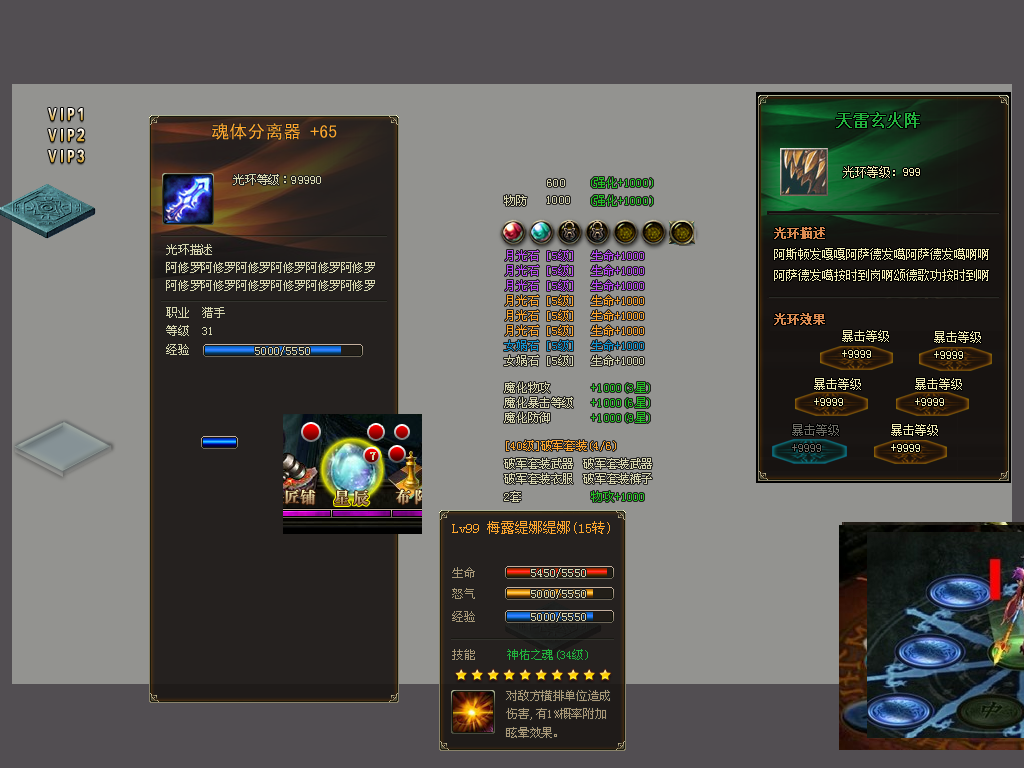
<style>
.page{position:relative;width:1024px;height:768px;background:#939390}
.page>*{position:absolute;margin:0}
.t1{font:18px "-G-h-e-i-0-1-m";font-weight:bold}
.t2{font:18px "SimHei";color:#ffa72e}
.t3{font:12px "SimSun";color:#d8d6af}
.t4{font:12px "SimSun";color:#23c423}
.t5{font:12px "SimSun";color:#be4bf9}
.t6{font:12px/18.6px "SimSun";color:#d8d6af}
.t7{font:12px "SimSun";color:#ffa72e}
.t8{font:12px "SimSun";color:#1096d5}
.t9{font:14px "SimSun";color:#ffa72e}
.t10{font:12px "SimSun";color:#a99877}
.t11{font:12px "SimSun";color:#22b33d}
.t12{font:12px/18.6px "SimSun";color:#a99877}
</style>
<div class="page">
<p class="t1" style="left:48px;top:108px;width:35px;height:13px">VIP1</p>
<p class="t2" style="left:212px;top:123px;width:125px;height:17px">魂体分离器 +65</p>
<p class="t1" style="left:48px;top:128px;width:37px;height:14px">VIP2</p>
<p class="t1" style="left:48px;top:149px;width:37px;height:14px">VIP3</p>
<p class="t3" style="left:233px;top:174px;width:88px;height:11px">光环等级：99990</p>
<p class="t3" style="left:547px;top:179px;width:18px;height:8px">600</p>
<p class="t4" style="left:591px;top:177px;width:62px;height:11px">(强化+1000)</p>
<p class="t3" style="left:504px;top:195px;width:23px;height:11px">物防</p>
<p class="t3" style="left:547px;top:196px;width:23px;height:8px">1000</p>
<p class="t4" style="left:591px;top:195px;width:62px;height:11px">(强化+1000)</p>
<p class="t3" style="left:166px;top:244px;width:46px;height:11px">光环描述</p>
<p class="t5" style="left:505px;top:250px;width:68px;height:11px">月光石 [5级]</p>
<p class="t5" style="left:591px;top:250px;width:53px;height:11px">生命+1000</p>
<p class="t6" style="left:166px;top:262px;width:209px;height:29px">阿修罗阿修罗阿修罗阿修罗阿修罗阿修罗<br>阿修罗阿修罗阿修罗阿修罗阿修罗阿修罗</p>
<p class="t5" style="left:505px;top:265px;width:68px;height:11px">月光石 [5级]</p>
<p class="t5" style="left:591px;top:265px;width:53px;height:11px">生命+1000</p>
<p class="t5" style="left:505px;top:280px;width:68px;height:11px">月光石 [5级]</p>
<p class="t5" style="left:591px;top:280px;width:53px;height:11px">生命+1000</p>
<p class="t7" style="left:505px;top:295px;width:68px;height:11px">月光石 [5级]</p>
<p class="t7" style="left:591px;top:295px;width:53px;height:11px">生命+1000</p>
<p class="t6" style="left:166px;top:307px;width:59px;height:48px">职业  猎手<br>等级  31<br>经验</p>
<p class="t7" style="left:505px;top:310px;width:68px;height:11px">月光石 [5级]</p>
<p class="t7" style="left:591px;top:310px;width:53px;height:11px">生命+1000</p>
<p class="t7" style="left:505px;top:325px;width:68px;height:11px">月光石 [5级]</p>
<p class="t7" style="left:591px;top:325px;width:53px;height:11px">生命+1000</p>
<p class="t8" style="left:504px;top:340px;width:69px;height:11px">女娲石 [5级]</p>
<p class="t8" style="left:591px;top:340px;width:53px;height:11px">生命+1000</p>
<p class="t3" style="left:255px;top:346px;width:55px;height:10px">5000/5550</p>
<p class="t3" style="left:504px;top:355px;width:69px;height:11px">女娲石 [5级]</p>
<p class="t3" style="left:591px;top:355px;width:53px;height:11px">生命+1000</p>
<p class="t3" style="left:504px;top:382px;width:46px;height:11px">魔化物攻</p>
<p class="t4" style="left:591px;top:382px;width:59px;height:11px">+1000(3星)</p>
<p class="t3" style="left:504px;top:397px;width:69px;height:11px">魔化暴击等级</p>
<p class="t4" style="left:591px;top:397px;width:59px;height:11px">+1000(6星)</p>
<p class="t3" style="left:504px;top:412px;width:46px;height:11px">魔化防御</p>
<p class="t4" style="left:591px;top:412px;width:59px;height:11px">+1000(9星)</p>
<p class="t7" style="left:506px;top:440px;width:110px;height:11px">[40级]破军套装(4/6)</p>
<p class="t3" style="left:504px;top:458px;width:69px;height:11px">破军套装武器</p>
<p class="t3" style="left:583px;top:458px;width:69px;height:11px">破军套装武器</p>
<p class="t3" style="left:504px;top:473px;width:69px;height:11px">破军套装衣服</p>
<p class="t3" style="left:583px;top:473px;width:69px;height:11px">破军套装裤子</p>
<p class="t3" style="left:504px;top:491px;width:17px;height:11px">2套</p>
<p class="t4" style="left:591px;top:491px;width:53px;height:11px">物攻+1000</p>
<p class="t9" style="left:452px;top:521px;width:158px;height:13px">Lv99 梅露缇娜缇娜(15转)</p>
<p class="t10" style="left:452px;top:567px;width:23px;height:11px">生命</p>
<p class="t3" style="left:531px;top:568px;width:55px;height:10px">5450/5550</p>
<p class="t10" style="left:452px;top:588px;width:23px;height:11px">怒气</p>
<p class="t3" style="left:531px;top:589px;width:55px;height:10px">5000/5550</p>
<p class="t10" style="left:452px;top:611px;width:23px;height:11px">经验</p>
<p class="t3" style="left:531px;top:612px;width:55px;height:10px">5000/5550</p>
<p class="t10" style="left:452px;top:649px;width:23px;height:11px">技能</p>
<p class="t11" style="left:507px;top:649px;width:81px;height:11px">神佑之魂(34级)</p>
<p class="t12" style="left:506px;top:690px;width:104px;height:48px">对敌方横排单位造成<br>伤害,有1%概率附加<br>眩晕效果。</p>
</div>
